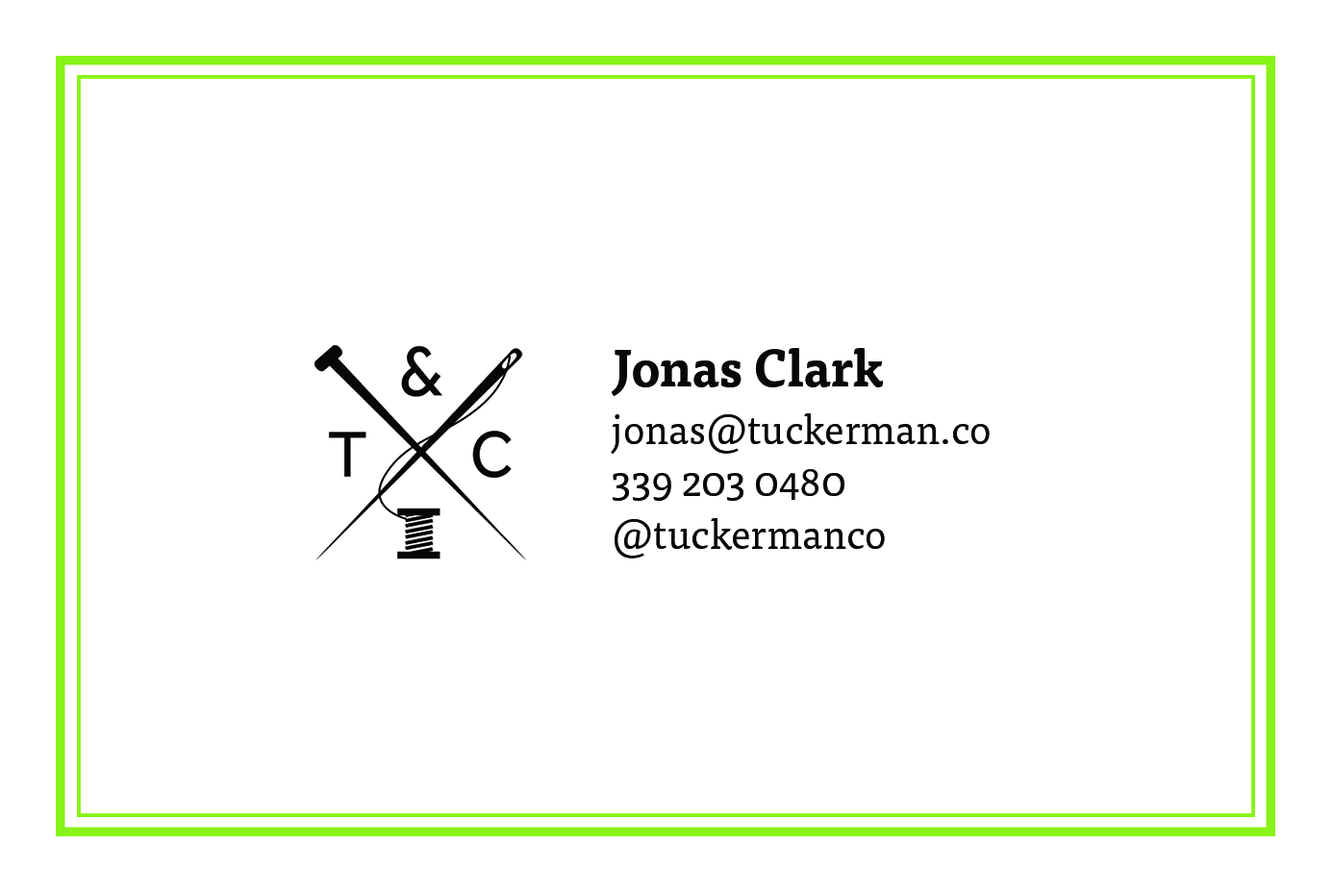
<style>
.page{position:relative;width:1333px;height:894px;background:#ffffff}
.page>*{position:absolute;margin:0}
.t1{font:41.7px/52.2px "TisaPro";color:#060808;scale:0.95 1}
.t2{font:52.2px/56.2px "TisaPro-Bold";color:#060808;scale:0.95 1}
.t3{font:41.7px/57.4px "TisaPro";color:#060808;scale:0.95 1}
</style>
<div class="page">
<p class="t1" style="left:611px;top:348px;width:379px;height:211px"><span class="t2">Jonas Clark <br></span><span class="t3">jonas@tuckerman.co<br></span>339 203 0480 <br>@tuckermanco</p>
</div>
